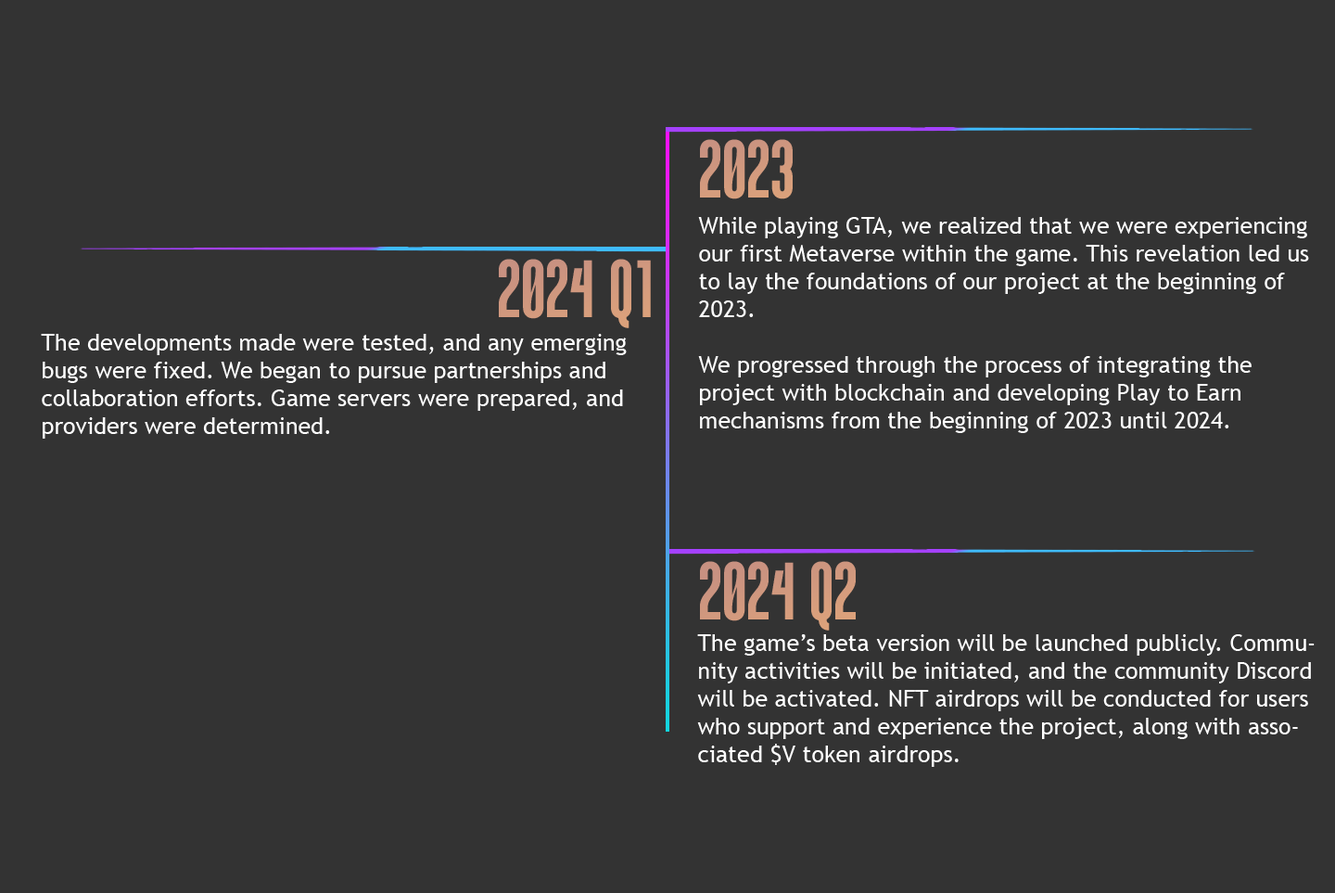
<style>
.page{position:relative;width:1335px;height:893px;background:#333333}
.page>*{position:absolute;margin:0}
.t1{font:81.1px "BrownlandRegular";color:#d1997e}
.t2{font:23.2px "TrebuchetMS";color:#ffffff}
.t3{font:81.1px "BrownlandRegular";color:#d0977e}
.t4{font:81.1px "BrownlandRegular";color:#d0987e}
</style>
<div class="page">
<p class="t1" style="left:700px;top:139px;width:93px;height:60px">2023</p>
<p class="t2" style="left:698px;top:217px;width:611px;height:216px">While playing GTA, we realized that we were experiencing our first Metaverse within the game. This revelation led us to lay the foundations of our project at the beginning of 2023.<br><br>We progressed through the process of integrating the <br>project with blockchain and developing Play to Earn <br>mechanisms from the beginning of 2023 until 2024.</p>
<p class="t3" style="left:499px;top:259px;width:152px;height:69px">2024 Q1</p>
<p class="t2" style="left:41px;top:334px;width:586px;height:105px">The developments made were tested, and any emerging bugs were fixed. We began to pursue partnerships and <br>collaboration efforts. Game servers were prepared, and providers were determined.</p>
<p class="t4" style="left:700px;top:561px;width:156px;height:70px">2024 Q2</p>
<p class="t2" style="left:697px;top:634px;width:618px;height:133px">The game’s beta version will be launched publicly. Community activities will be initiated, and the community Discord will be activated. NFT airdrops will be conducted for users who support and experience the project, along with associated $V token airdrops.</p>
</div>
